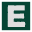
<style>
.page{position:relative;width:32px;height:32px;background:#054534}
.page>*{position:absolute;margin:0}
.t1{font:30px "NexaRustSans-Black";color:#dfdfdf}
</style>
<div class="page">
<p class="t1" style="left:7px;top:5px;width:19px;height:22px">E</p>
</div>
